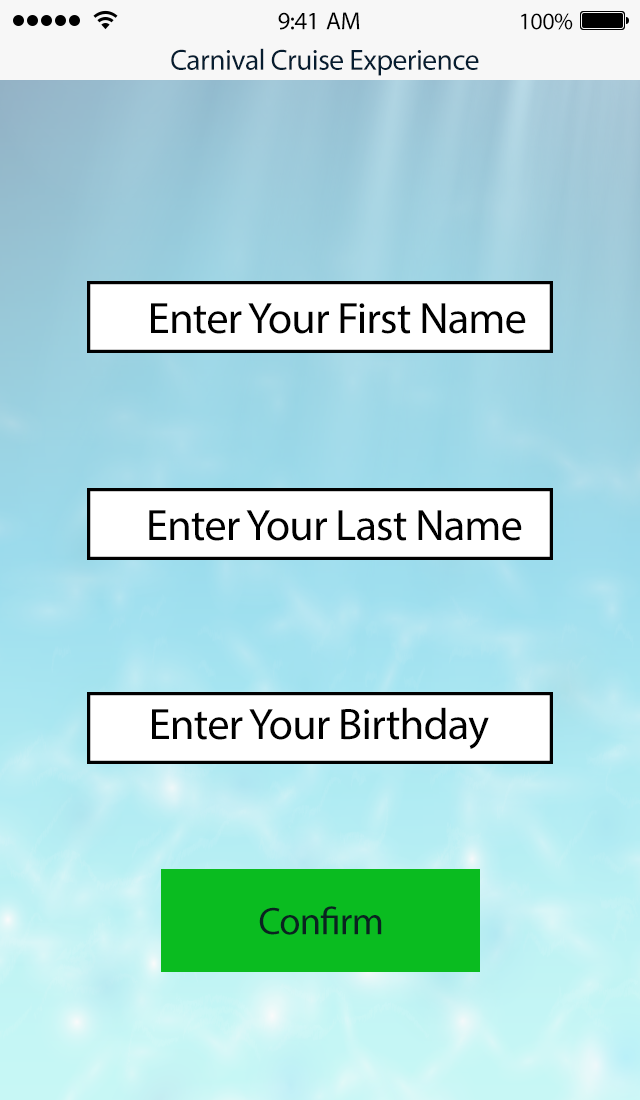
<style>
.page{position:relative;width:640px;height:1100px}
.page>*{position:absolute;margin:0}
.t1{font:25px "MyriadPro-Regular";letter-spacing:-0.02em;color:#000000}
.t2{font:24px "MyriadPro-Regular";letter-spacing:-0.02em;color:#000000}
.t3{font:29.4px "MyriadPro-Regular";letter-spacing:-0.02em;color:#061d30}
.t4{font:44.2px "MyriadPro-Regular";letter-spacing:-0.02em;color:#000000}
.t5{font:38.6px "MyriadPro-Regular";letter-spacing:-0.02em;color:#0a2320}
</style>
<div class="page">
<p class="t1" style="left:278px;top:12px;width:82px;height:18px">9:41 AM</p>
<p class="t2" style="left:521px;top:13px;width:52px;height:17px">100%</p>
<p class="t3" style="left:171px;top:48px;width:308px;height:28px">Carnival Cruise Experience</p>
<p class="t4" style="left:151px;top:303px;width:375px;height:31px">Enter Your First Name</p>
<p class="t4" style="left:149px;top:510px;width:373px;height:31px">Enter Your Last Name</p>
<p class="t4" style="left:152px;top:707px;width:337px;height:42px">Enter Your Birthday</p>
<p class="t5" style="left:259px;top:906px;width:123px;height:29px">Confirm</p>
</div>
